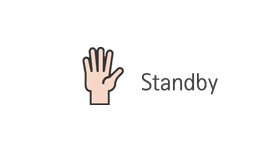
<style>
.page{position:relative;width:280px;height:150px;background:#ffffff}
.page>*{position:absolute;margin:0}
.t1{font:24px "SeN-CM";color:#464545}
</style>
<div class="page">
<p class="t1" style="left:141px;top:72px;width:77px;height:23px">Standby</p>
</div>
